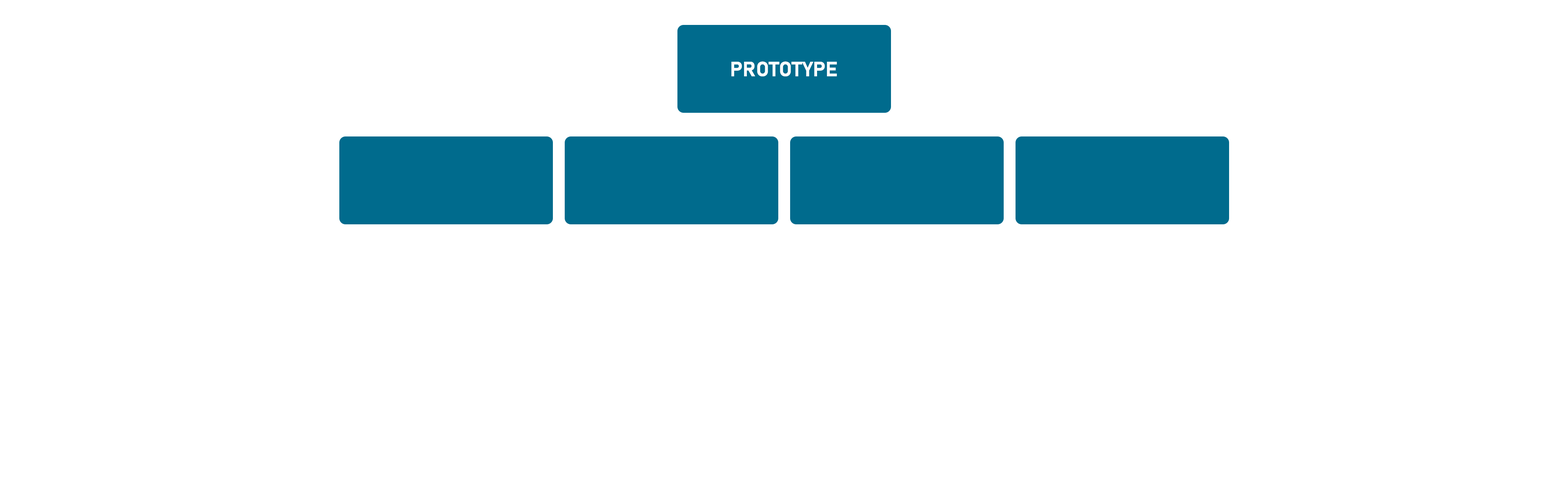
<style>
.page{position:relative;width:1568px;height:503px;background:#ffffff}
.page>*{position:absolute;margin:0}
.t1{font:20.4px "Bahnschrift-Bold";color:#ffffff}
</style>
<div class="page">
<p class="t1" style="left:731px;top:61px;width:106px;height:15px">PROTOTYPE</p>
</div>
